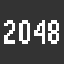
<style>
.page{position:relative;width:64px;height:64px;background:#333333}
.page>*{position:absolute;margin:0}
.t1{font:40.9px "Glasstown-NBP";letter-spacing:0.005em;color:#ffffff;font-weight:bold}
</style>
<div class="page">
<p class="t1" style="left:4px;top:20px;width:55px;height:24px">2048</p>
</div>
